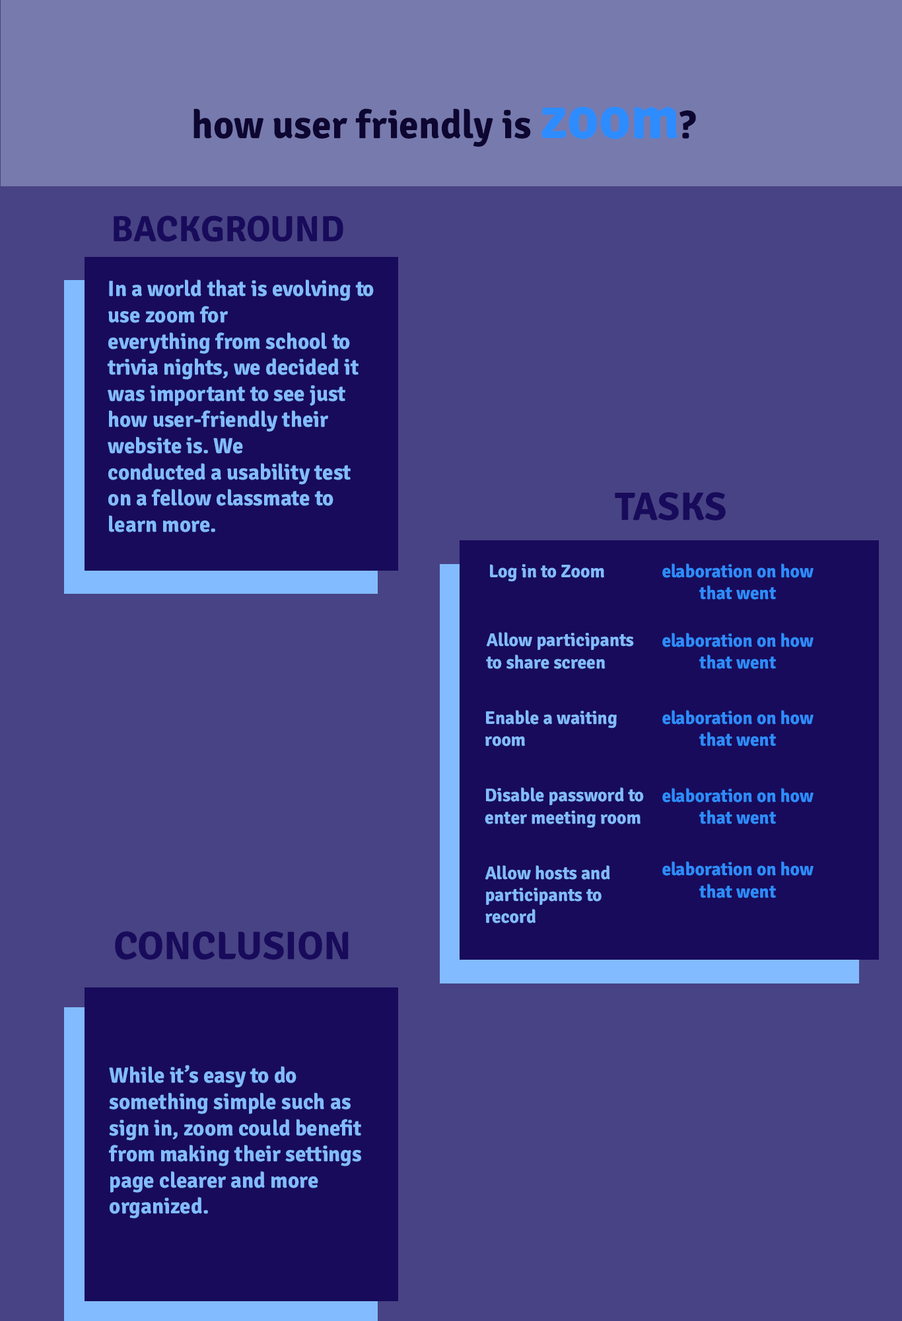
<style>
.page{position:relative;width:902px;height:1321px;background:#484384}
.page>*{position:absolute;margin:0}
.t1{font:39.6px "Signika-Bold";color:#0d0630}
.t2{font:60.8px "Signika-Bold";color:#2d8cff}
.t3{font:36.3px "Signika-Bold";color:#180b5b}
.t4{font:21.8px "Signika-Bold";color:#82bbff}
.t5{font:39.6px "Signika-Bold";color:#180b5b}
.t6{font:18.3px "Signika-Bold";color:#82bbff}
.t7{font:18.3px "Signika-Bold";color:#2d8cff}
</style>
<div class="page">
<p class="t1" style="left:194px;top:106px;width:502px;height:41px">how user friendly is <span class="t2">zoom</span>?<br><span class="t2"><br>m</span>?</p>
<p class="t3" style="left:114px;top:215px;width:230px;height:27px">BACKGROUND</p>
<p class="t4" style="left:107px;top:279px;width:267px;height:253px">In a world that is evolving to use zoom for <br>everything from school to trivia nights, we decided it was important to see just how user-friendly their website is. We <br>conducted a usability test on a fellow classmate to learn more.</p>
<p class="t5" style="left:615px;top:492px;width:111px;height:29px">TASKS</p>
<p class="t6" style="left:490px;top:564px;width:115px;height:18px">Log in to Zoom</p>
<p class="t7" style="left:663px;top:564px;width:151px;height:36px;text-align:center">elaboration on how that went</p>
<p class="t6" style="left:486px;top:632px;width:148px;height:37px">Allow participants to share screen</p>
<p class="t7" style="left:663px;top:633px;width:151px;height:36px;text-align:center">elaboration on how that went</p>
<p class="t6" style="left:485px;top:710px;width:132px;height:37px">Enable a waiting room</p>
<p class="t7" style="left:663px;top:710px;width:151px;height:37px;text-align:center">elaboration on how that went</p>
<p class="t6" style="left:485px;top:788px;width:159px;height:40px">Disable password to enter meeting room</p>
<p class="t7" style="left:663px;top:788px;width:151px;height:37px;text-align:center">elaboration on how that went</p>
<p class="t6" style="left:485px;top:865px;width:125px;height:59px">Allow hosts and participants to record</p>
<p class="t7" style="left:663px;top:861px;width:151px;height:37px;text-align:center">elaboration on how that went</p>
<p class="t5" style="left:115px;top:932px;width:234px;height:28px">CONCLUSION</p>
<p class="t4" style="left:108px;top:1065px;width:253px;height:154px">While it’s easy to do <br>something simple such as sign in, zoom could benefit from making their settings page clearer and more <br>organized.</p>
</div>
